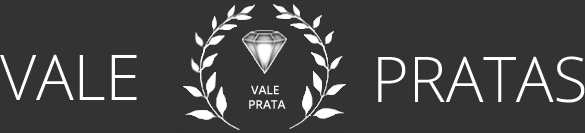
<style>
.page{position:relative;width:585px;height:133px;background:#333333}
.page>*{position:absolute;margin:0}
.t1{font:63px "OpenSans-Light";letter-spacing:-0.005em;color:#ffffff}
.t2{font:12px/14.4px "OpenSans-Semibold";letter-spacing:-0.005em;color:#ffffff}
</style>
<div class="page">
<p class="t1" style="left:0px;top:54px;width:137px;height:46px">VALE</p>
<p class="t1" style="left:378px;top:56px;width:207px;height:47px">PRATAS</p>
<p class="t2" style="left:249px;top:85px;width:37px;height:24px;text-align:center">VALE <br>PRATA</p>
</div>
